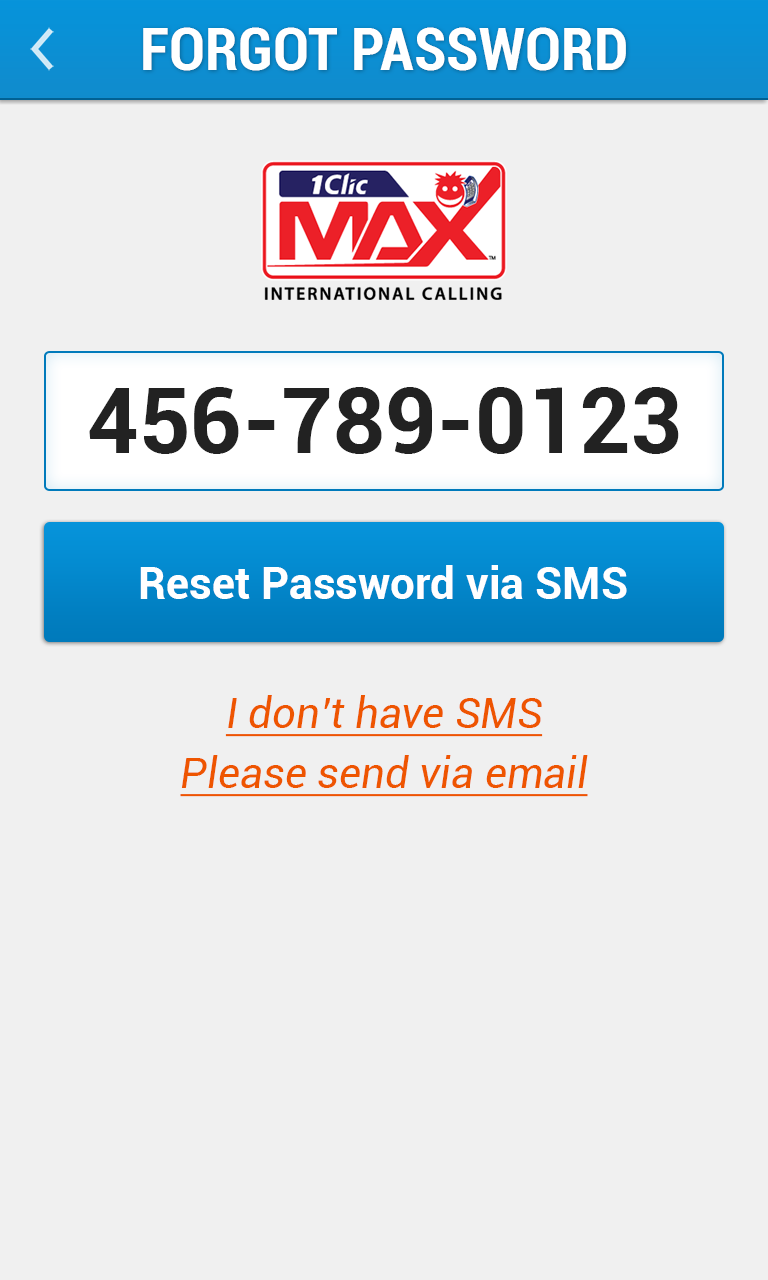
<style>
.page{position:relative;width:768px;height:1280px;background:#f0f0f0}
.page>*{position:absolute;margin:0}
.t1{font:60px "Roboto-BoldCondensed";color:#ffffff}
.t2{font:90px "Roboto-Bold";color:#222222}
.t3{font:44px "Roboto-Bold";color:#ffffff}
.t4{font:42px/60px "Roboto-Italic";color:#ee5500;text-decoration:underline}
</style>
<div class="page">
<p class="t1" style="left:143px;top:27px;width:483px;height:44px">FORGOT PASSWORD</p>
<p class="t2" style="left:89px;top:387px;width:590px;height:67px">456-789-0123</p>
<p class="t3" style="left:140px;top:565px;width:487px;height:34px">Reset Password via SMS</p>
<p class="t4" style="left:180px;top:695px;width:408px;height:102px;text-align:center">I don’t have SMS<br>Please send via email</p>
</div>
